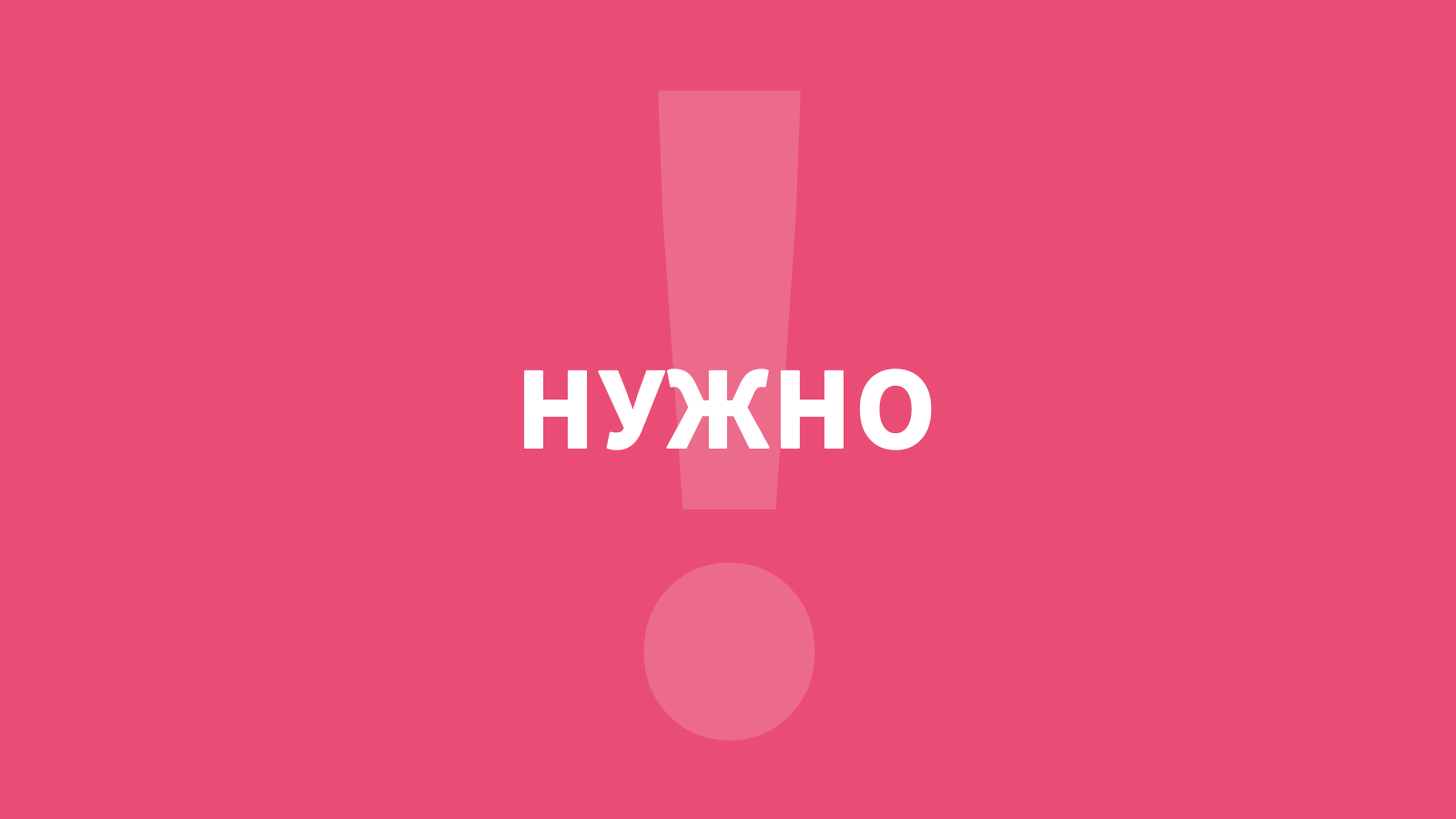
<style>
.page{position:relative;width:1456px;height:819px;background:#e94d75}
.page>*{position:absolute;margin:0}
.t1{font:117.8px "SourceSansPro-Bold";color:#ffffff;text-transform:uppercase;font-weight:bold}
</style>
<div class="page">
<p class="t1" style="left:523px;top:369px;width:409px;height:81px">Нужно</p>
</div>
